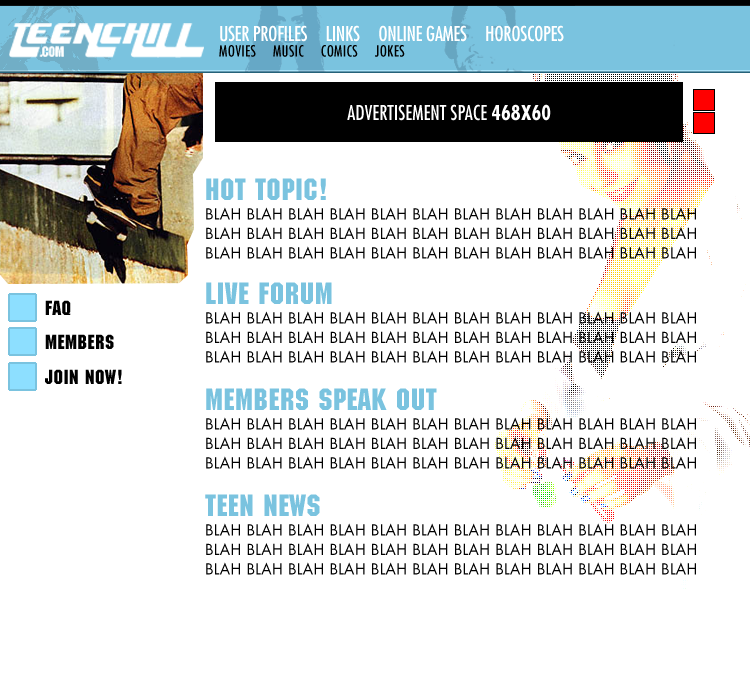
<style>
.page{position:relative;width:750px;height:700px;background:#ffffff}
.page>*{position:absolute;margin:0}
.t1{font:20px/15.5px "Futura-Condensed";letter-spacing:-0.02em;color:#ffffff}
.t2{font:15px/15.5px "Futura-Condensed";letter-spacing:0.02em;color:#000000}
.t3{font:15px/19.5px "Futura-Book";letter-spacing:0.02em;color:#000000}
.t4{font:30px/19.5px "Machine";letter-spacing:0.02em;color:#7ac3df}
.t5{font:20px "Machine";letter-spacing:0.02em;color:#000000}
</style>
<div class="page">
<p class="t1" style="left:219px;top:25px;width:345px;height:32px">USER PROFILES     LINKS     ONLINE GAMES     HOROSCOPES    <br><span class="t2">MOVIES     MUSIC     COMICS     JOKES</span></p>
<p class="t3" style="left:206px;top:178px;width:490px;height:81px"><span class="t4">HOT TOPIC!<br></span>BLAH BLAH BLAH BLAH BLAH BLAH BLAH BLAH BLAH BLAH BLAH BLAH <br>BLAH BLAH BLAH BLAH BLAH BLAH BLAH BLAH BLAH BLAH BLAH BLAH <br>BLAH BLAH BLAH BLAH BLAH BLAH BLAH BLAH BLAH BLAH BLAH BLAH</p>
<p class="t3" style="left:206px;top:282px;width:490px;height:81px"><span class="t4">LIVE FORUM<br></span>BLAH BLAH BLAH BLAH BLAH BLAH BLAH BLAH BLAH BLAH BLAH BLAH <br>BLAH BLAH BLAH BLAH BLAH BLAH BLAH BLAH BLAH BLAH BLAH BLAH <br>BLAH BLAH BLAH BLAH BLAH BLAH BLAH BLAH BLAH BLAH BLAH BLAH</p>
<p class="t5" style="left:45px;top:300px;width:26px;height:15px">FAQ</p>
<p class="t5" style="left:45px;top:334px;width:69px;height:15px">MEMBERS</p>
<p class="t5" style="left:45px;top:369px;width:77px;height:15px">JOIN NOW!</p>
<p class="t3" style="left:206px;top:388px;width:490px;height:81px"><span class="t4">MEMBERS SPEAK OUT<br></span>BLAH BLAH BLAH BLAH BLAH BLAH BLAH BLAH BLAH BLAH BLAH BLAH <br>BLAH BLAH BLAH BLAH BLAH BLAH BLAH BLAH BLAH BLAH BLAH BLAH <br>BLAH BLAH BLAH BLAH BLAH BLAH BLAH BLAH BLAH BLAH BLAH BLAH</p>
<p class="t3" style="left:205px;top:494px;width:491px;height:81px"><span class="t4">TEEN NEWS<br></span>BLAH BLAH BLAH BLAH BLAH BLAH BLAH BLAH BLAH BLAH BLAH BLAH <br>BLAH BLAH BLAH BLAH BLAH BLAH BLAH BLAH BLAH BLAH BLAH BLAH <br>BLAH BLAH BLAH BLAH BLAH BLAH BLAH BLAH BLAH BLAH BLAH BLAH</p>
</div>
